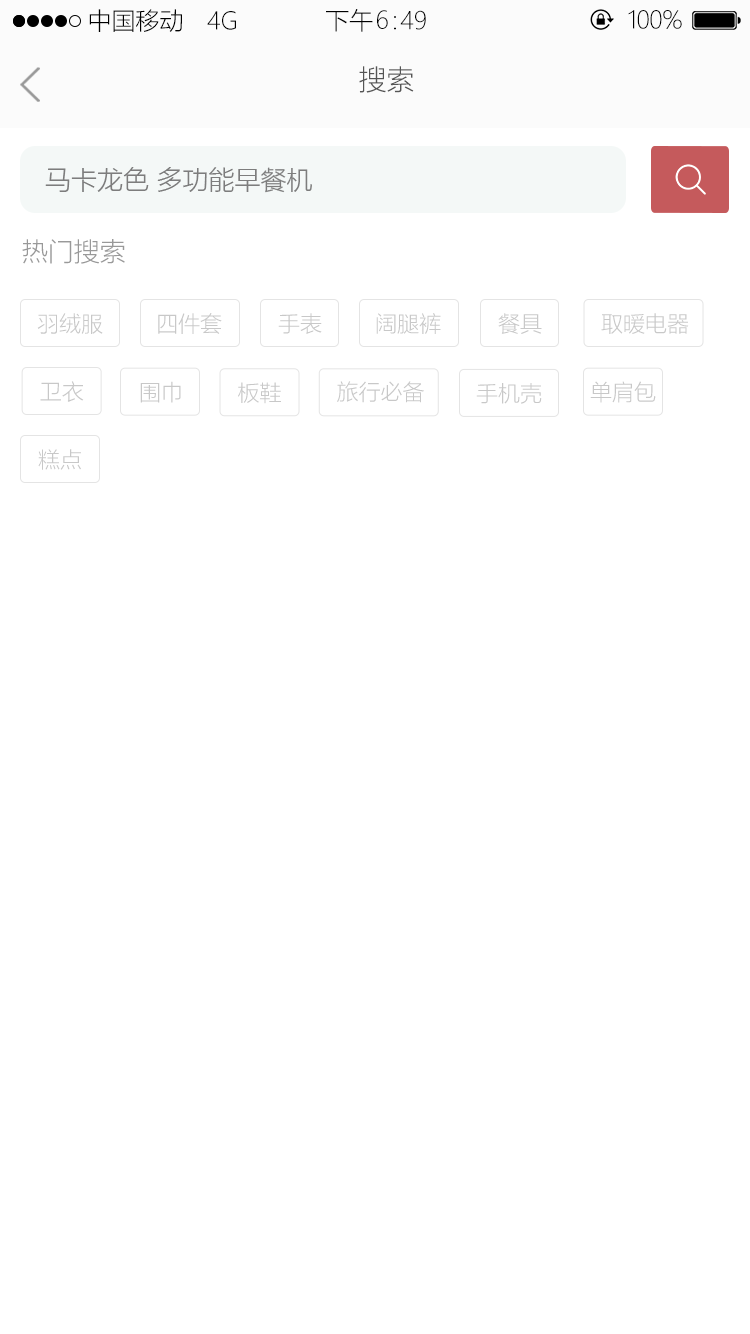
<style>
.page{position:relative;width:750px;height:1334px;background:#ffffff}
.page>*{position:absolute;margin:0}
.t1{font:24px "MicrosoftYaHeiUILight";color:#000000}
.t2{font:28px "MicrosoftYaHeiUILight";color:#555555}
.t3{font:26px "MicrosoftYaHeiUILight";color:#7d7d7d}
.t4{font:26px "MicrosoftYaHeiUILight";color:#999999}
.t5{font:22px "MicrosoftYaHeiUILight";color:#c8c8c8}
</style>
<div class="page">
<p class="t1" style="left:89px;top:9px;width:93px;height:23px">中国移动</p>
<p class="t1" style="left:207px;top:11px;width:29px;height:19px">4G</p>
<p class="t1" style="left:326px;top:9px;width:47px;height:23px">下午</p>
<p class="t1" style="left:377px;top:10px;width:11px;height:19px">6</p>
<p class="t1" style="left:394px;top:16px;width:2px;height:14px">：</p>
<p class="t1" style="left:400px;top:10px;width:26px;height:20px">49</p>
<p class="t1" style="left:628px;top:10px;width:54px;height:19px">100%</p>
<p class="t2" style="left:359px;top:66px;width:55px;height:27px">搜索</p>
<p class="t3" style="left:45px;top:167px;width:267px;height:26px">马卡龙色 多功能早餐机</p>
<p class="t4" style="left:22px;top:239px;width:103px;height:25px">热门搜索</p>
<p class="t5" style="left:37px;top:313px;width:66px;height:21px">羽绒服</p>
<p class="t5" style="left:158px;top:313px;width:64px;height:21px">四件套</p>
<p class="t5" style="left:278px;top:313px;width:44px;height:21px">手表</p>
<p class="t5" style="left:376px;top:313px;width:65px;height:21px">阔腿裤</p>
<p class="t5" style="left:498px;top:313px;width:44px;height:21px">餐具</p>
<p class="t5" style="left:601px;top:313px;width:88px;height:21px">取暖电器</p>
<p class="t5" style="left:40px;top:381px;width:44px;height:21px">卫衣</p>
<p class="t5" style="left:140px;top:381px;width:41px;height:22px">围巾</p>
<p class="t5" style="left:238px;top:382px;width:43px;height:22px">板鞋</p>
<p class="t5" style="left:337px;top:381px;width:87px;height:22px">旅行必备</p>
<p class="t5" style="left:476px;top:383px;width:66px;height:21px">手机壳</p>
<p class="t5" style="left:590px;top:381px;width:66px;height:22px">单肩包</p>
<p class="t5" style="left:38px;top:449px;width:43px;height:21px">糕点</p>
</div>
